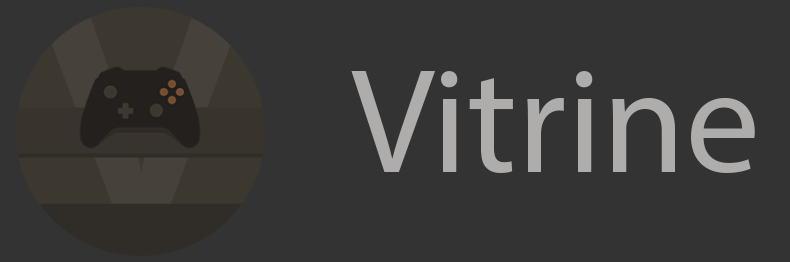
<style>
.page{position:relative;width:790px;height:262px;background:#333333}
.page>*{position:absolute;margin:0}
.t1{font:150px "MyriadPro-Regular";color:#aeadac}
</style>
<div class="page">
<p class="t1" style="left:351px;top:71px;width:404px;height:102px">Vitrine<br>rine</p>
</div>
